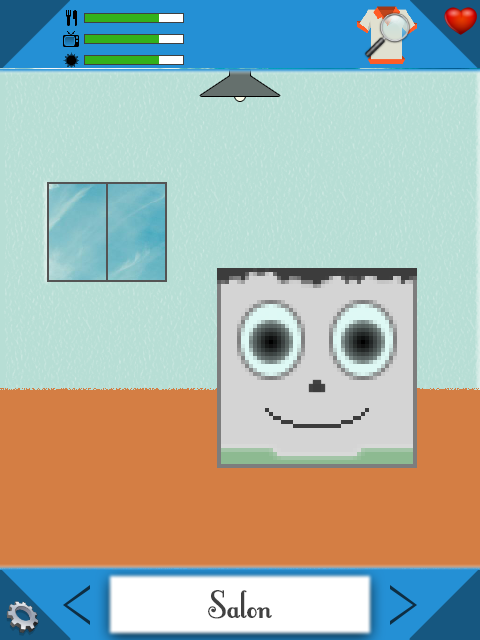
<style>
.page{position:relative;width:480px;height:640px;background:#d47e44}
.page>*{position:absolute;margin:0}
.t1{font:48px "FontleroyBrown";color:#414141}
</style>
<div class="page">
<p class="t1" style="left:208px;top:590px;width:64px;height:29px">Salon</p>
</div>
